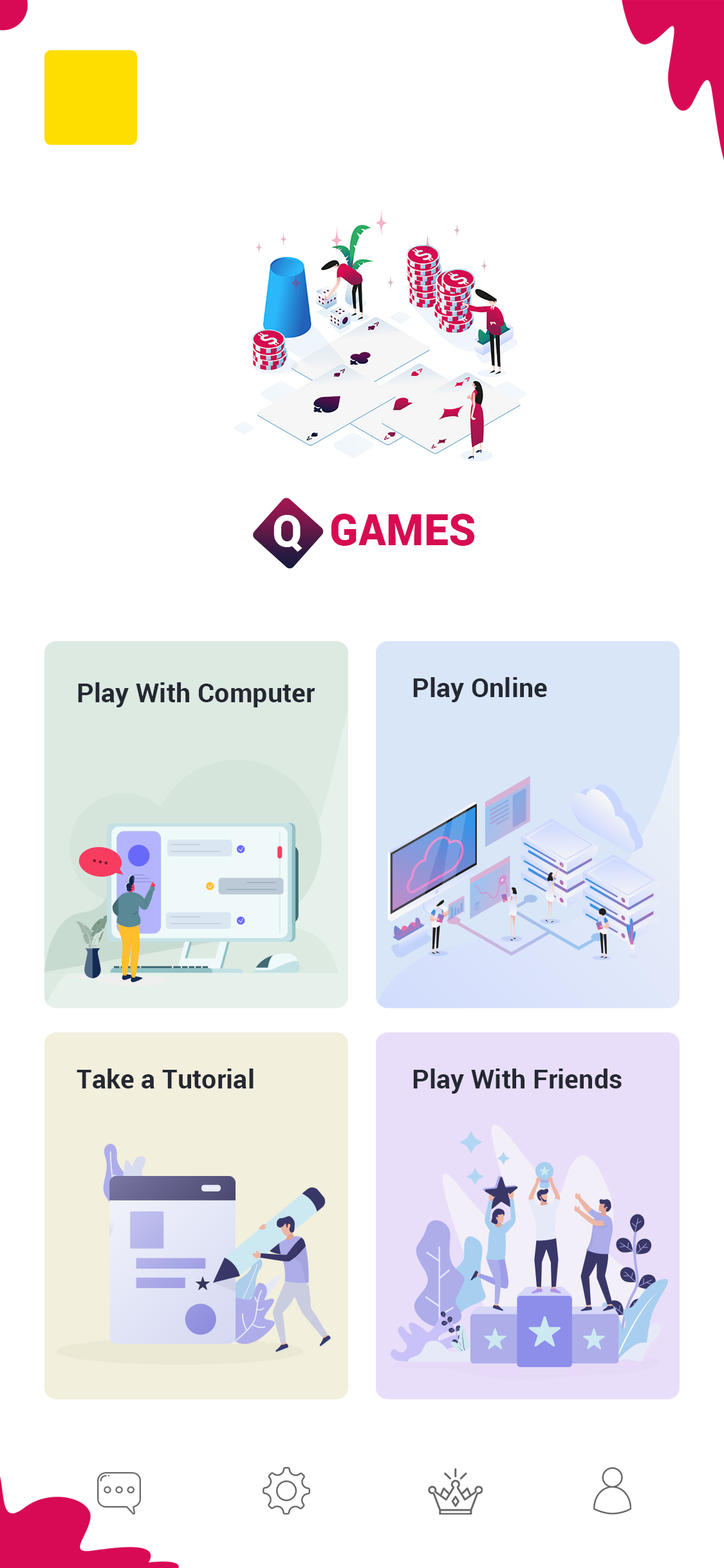
<style>
.page{position:relative;width:724px;height:1568px;background:#ffffff}
.page>*{position:absolute;margin:0}
.t1{font:43.5px "Roboto-Black";letter-spacing:0.005em;color:#ffffff}
.t2{font:43.5px "Roboto-Black";letter-spacing:0.005em;color:#d70b52}
.t3{font:26.4px "Roboto-Bold";letter-spacing:0.005em;color:#252832}
</style>
<div class="page">
<p class="t1" style="left:274px;top:515px;width:29px;height:37px">Q</p>
<p class="t2" style="left:331px;top:514px;width:144px;height:32px">GAMES</p>
<p class="t3" style="left:413px;top:677px;width:134px;height:25px">Play Online</p>
<p class="t3" style="left:78px;top:682px;width:237px;height:25px">Play With Computer</p>
<p class="t3" style="left:77px;top:1069px;width:177px;height:19px">Take a Tutorial</p>
<p class="t3" style="left:413px;top:1069px;width:209px;height:25px">Play With Friends</p>
</div>
